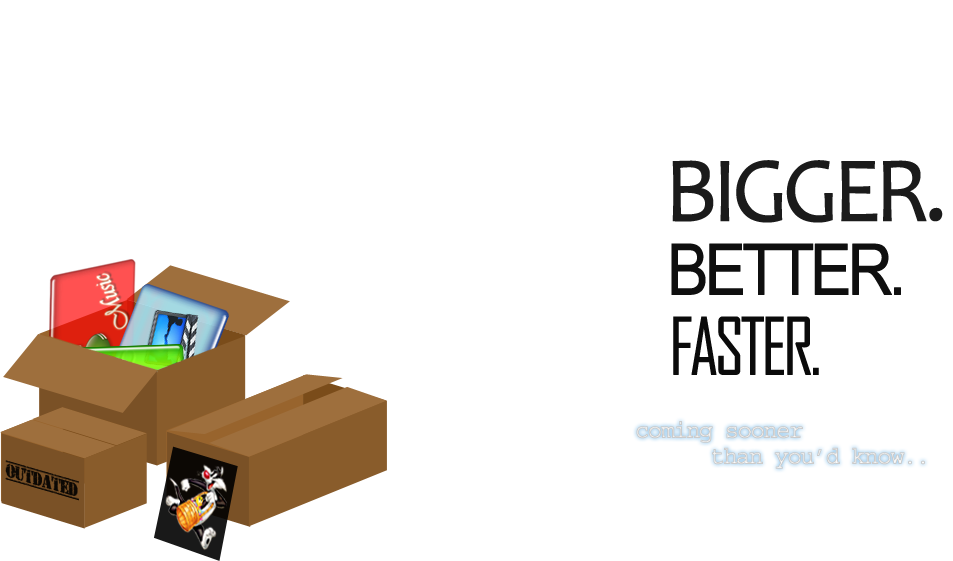
<style>
.page{position:relative;width:953px;height:561px;background:#ffffff}
.page>*{position:absolute;margin:0}
.t1{font:93.9px "Candara";letter-spacing:-0.08em;color:#1b1b1b;font-weight:bold;scale:0.95 1}
.t2{font:80.8px "BRHLatin";letter-spacing:-0.08em;color:#0f0f0f;font-weight:bold;scale:0.87 1}
.t3{font:75.5px "AgencyFB-Reg";letter-spacing:-0.08em;color:#0a0a0a;font-weight:bold;scale:0.95 1}
.t4{font:24.7px/25.9px "CourierHP";letter-spacing:-0.08em;color:#dcdcdc;font-weight:bold;scale:0.95 1}
</style>
<div class="page">
<p class="t1" style="left:672px;top:160px;width:271px;height:63px">BIGGER.</p>
<p class="t2" style="left:671px;top:243px;width:230px;height:52px">BETTER.</p>
<p class="t3" style="left:673px;top:316px;width:146px;height:59px">FASTER.</p>
<p class="t4" style="left:636px;top:421px;width:289px;height:48px">coming sooner <br>  than you’d know..</p>
</div>
